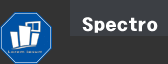
<style>
.page{position:relative;width:168px;height:64px;background:#333333}
.page>*{position:absolute;margin:0}
.t1{font:16px "HeadlineR-HM";color:#ffffff}
</style>
<div class="page">
<p class="t1" style="left:82px;top:17px;width:76px;height:16px">Spectro</p>
</div>
